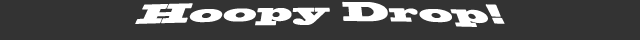
<style>
.page{position:relative;width:640px;height:40px;background:#333333}
.page>*{position:absolute;margin:0}
.t1{font:25px "BlackoakStd";color:#ffffff}
</style>
<div class="page">
<p class="t1" style="left:135px;top:1px;width:370px;height:26px">Hoopy Drop!</p>
</div>
